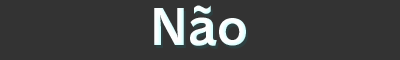
<style>
.page{position:relative;width:400px;height:60px;background:#333333}
.page>*{position:absolute;margin:0}
.t1{font:48px "RodinPro-B";color:#fefefe}
</style>
<div class="page">
<p class="t1" style="left:154px;top:5px;width:92px;height:41px">Não</p>
</div>
